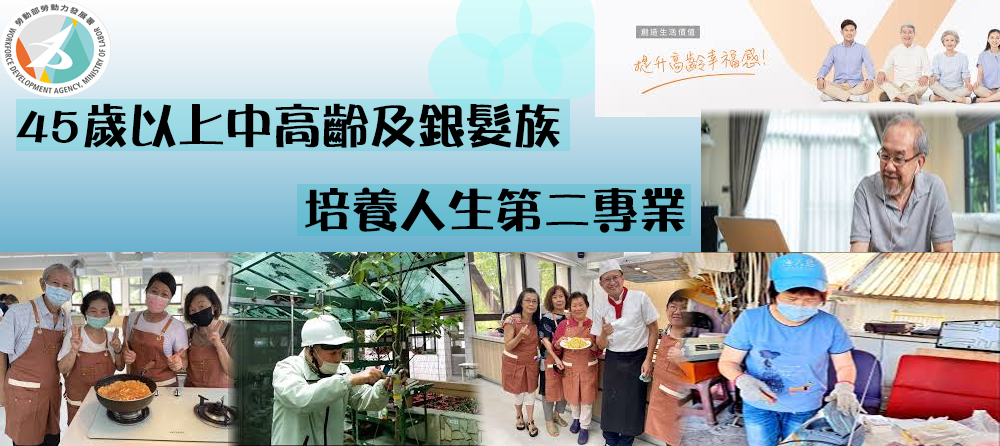
<style>
.page{position:relative;width:1000px;height:446px}
.page>*{position:absolute;margin:0}
.t1{font:48px "DFPOP3Std-W12";color:#000000}
</style>
<div class="page">
<p class="t1" style="left:16px;top:103px;width:669px;height:130px">45歲以上中高齡及銀髮族 <br>                  培養人生第二專業</p>
</div>
